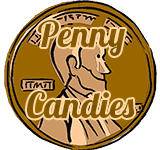
<style>
.page{position:relative;width:160px;height:150px;background:#ffffff}
.page>*{position:absolute;margin:0}
.t1{font:36px "Lobster1.4";color:#9a6600}
</style>
<div class="page">
<p class="t1" style="left:38px;top:20px;width:88px;height:36px">Penny</p>
<p class="t1" style="left:27px;top:91px;width:108px;height:28px">Candies</p>
</div>
